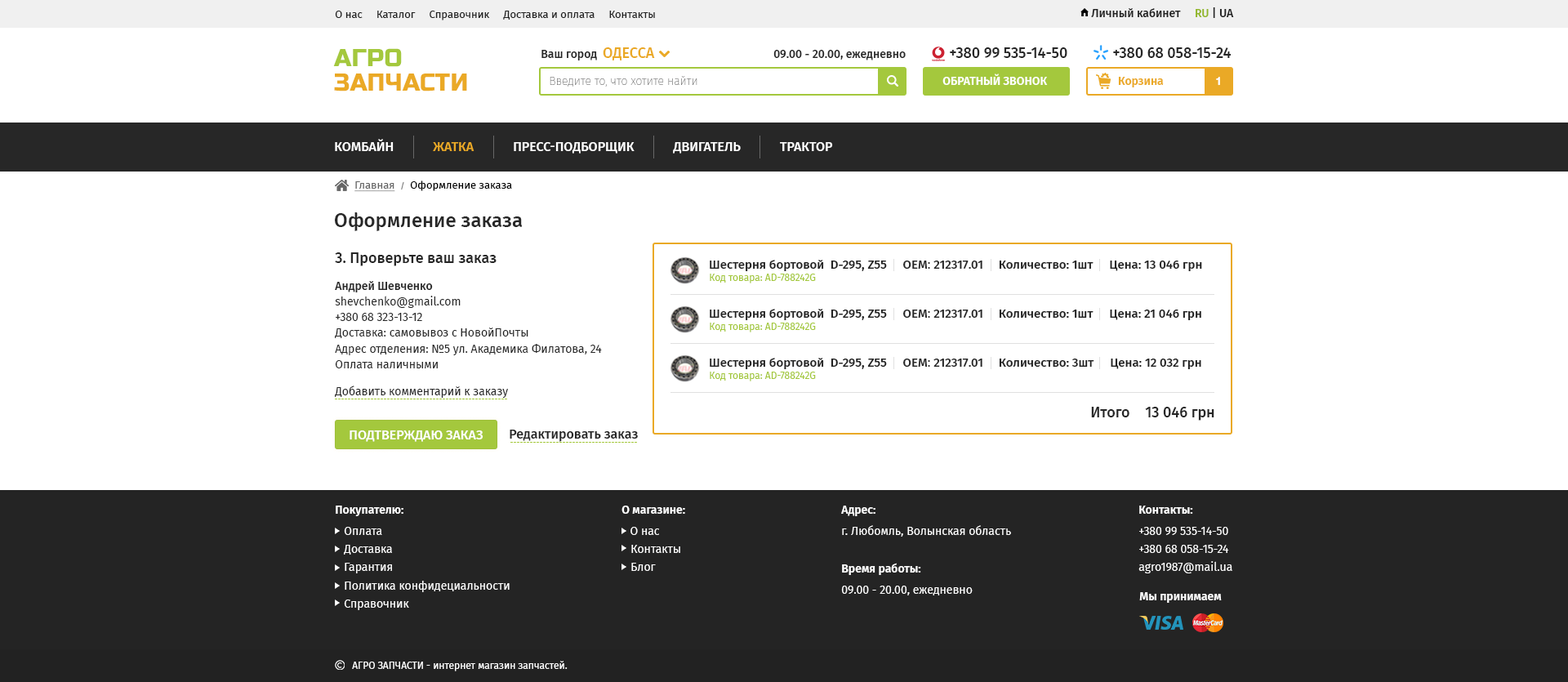
<style>
.page{position:relative;width:1568px;height:682px;background:#ffffff}
.page>*{position:absolute;margin:0}
.t1{font:10.6px "FiraSans-Regular";color:#212121}
.t2{font:11.4px "FiraSans-Medium";color:#212121}
.t3{font:11.4px "FiraSans-Medium";color:#91b627}
.t4{font:24.5px/24.5px "RussoOne-Regular";color:#eaa926;text-transform:uppercase}
.t5{font:24.5px/24.5px "RussoOne-Regular";color:#a4c83d;text-transform:uppercase}
.t6{font:11.4px "FiraSans-Medium";color:#272727}
.t7{font:14.7px "FiraSans-Medium";color:#eaa926}
.t8{font:14.7px "FiraSans-Medium";color:#272727}
.t9{font:11.4px "FiraSans-Thin";color:#777777}
.t10{font:11.4px "FiraSans-SemiBold";color:#ffffff;text-transform:uppercase}
.t11{font:11.4px "FiraSans-SemiBold";color:#eaa926}
.t12{font:11.4px "HelveticaNeueCyr-Bold";color:#ffffff}
.t13{font:13.1px "FiraSans-Medium";color:#ffffff;text-transform:uppercase}
.t14{font:13.1px "FiraSans-Medium";color:#eaa926;text-transform:uppercase}
.t15{font:10.6px "FiraSans-Regular";color:#000000}
.t16{font:10.6px "FiraSans-Regular";color:#676767;text-decoration:underline}
.t17{font:8.2px "FiraSans-Regular";color:#676767}
.t18{font:19.6px "FiraSans-Medium";color:#272727}
.t19{font:12.2px "FiraSans-Medium";color:#212121}
.t20{font:12.2px "FiraSans-Medium";color:#272727}
.t21{font:12.2px "FiraSans-Regular";color:#272727}
.t22{font:11.4px/15.5px "FiraSans-Regular";color:#272727}
.t23{font:11.4px/15.5px "FiraSans-Medium";color:#272727}
.t24{font:9.8px "FiraSans-Regular";color:#a4c83d}
.t25{font:11.4px "FiraSans-Regular";color:#272727}
.t26{font:13.1px "FiraSans-Medium";color:#272727}
.t27{font:11.4px/18px "FiraSans-Regular";color:#ffffff}
.t28{font:11.4px/21.2px "FiraSans-SemiBold";color:#ffffff}
.t29{font:11.4px/21.2px "FiraSans-Regular";color:#ffffff}
.t30{font:11.4px "FiraSans-SemiBold";color:#ffffff}
.t31{font:9.8px "FiraSans-Regular";color:#ffffff}
</style>
<div class="page">
<p class="t1" style="left:335px;top:11px;width:320px;height:9px">О нас     Каталог     Справочник     Доставка и оплата     Контакты</p>
<p class="t2" style="left:1091px;top:7px;width:143px;height:11px">Личный кабинет     <span class="t3">RU</span> | UA</p>
<p class="t4" style="left:333px;top:48px;width:134px;height:43px"><span class="t5">АГРО<br></span>ЗАПЧАСТИ</p>
<p class="t6" style="left:541px;top:47px;width:114px;height:13px">Ваш город  <span class="t7">ОДЕССА</span></p>
<p class="t6" style="left:773px;top:50px;width:133px;height:10px">09.00 - 20.00, ежедневно</p>
<p class="t8" style="left:950px;top:47px;width:117px;height:11px">+380 99 535-14-50</p>
<p class="t8" style="left:1113px;top:47px;width:118px;height:11px">+380 68 058-15-24</p>
<p class="t9" style="left:550px;top:76px;width:147px;height:11px">Введите то, что хотите найти</p>
<p class="t10" style="left:942px;top:74px;width:106px;height:11px">Обратный звонок</p>
<p class="t11" style="left:1118px;top:77px;width:46px;height:10px">Корзина</p>
<p class="t12" style="left:1216px;top:77px;width:4px;height:9px">1</p>
<p class="t13" style="left:335px;top:139px;width:498px;height:15px">КОМБАЙН            <span class="t14">ЖАТКА            </span>ПРЕСС-ПОДБОРЩИК            ДВИГАТЕЛЬ            трактор</p>
<p class="t15" style="left:354px;top:180px;width:158px;height:12px"><span class="t16">Главная  </span><span class="t17">/</span>  Оформление заказа</p>
<p class="t18" style="left:335px;top:212px;width:188px;height:19px">Оформление заказа</p>
<p class="t8" style="left:335px;top:252px;width:162px;height:14px">3. Проверьте ваш заказ</p>
<p class="t19" style="left:710px;top:260px;width:492px;height:11px">Шестерня бортовой  D-295, Z55     <span class="t20">ОЕМ</span><span class="t21">: </span><span class="t20">212317.01     </span>Количество: 1шт     Цена: 13 046 грн</p>
<p class="t22" style="left:335px;top:281px;width:267px;height:87px"><span class="t23">Андрей Шевченко<br></span>shevchenko@gmail.com<br>+380 68 323-13-12<br>Доставка: самовывоз с НовойПочты<br>Адрес отделения: №5 ул. Академика Филатова, 24<br>Оплата наличными</p>
<p class="t24" style="left:710px;top:274px;width:106px;height:9px">Код товара: AD-788242G</p>
<p class="t19" style="left:710px;top:309px;width:491px;height:11px">Шестерня бортовой  D-295, Z55     <span class="t20">ОЕМ</span><span class="t21">: </span><span class="t20">212317.01     </span>Количество: 1шт     Цена: 21 046 грн</p>
<p class="t24" style="left:710px;top:323px;width:106px;height:9px">Код товара: AD-788242G</p>
<p class="t19" style="left:710px;top:358px;width:491px;height:11px">Шестерня бортовой  D-295, Z55     <span class="t20">ОЕМ</span><span class="t21">: </span><span class="t20">212317.01     </span>Количество: 3шт     Цена: 12 032 грн</p>
<p class="t24" style="left:710px;top:372px;width:106px;height:9px">Код товара: AD-788242G</p>
<p class="t25" style="left:335px;top:385px;width:173px;height:13px">Добавить комментарий к заказу</p>
<p class="t8" style="left:1091px;top:407px;width:38px;height:10px">Итого</p>
<p class="t8" style="left:1145px;top:407px;width:69px;height:14px">13 046 грн</p>
<p class="t13" style="left:350px;top:430px;width:133px;height:12px">подтверждаю заказ</p>
<p class="t26" style="left:510px;top:430px;width:128px;height:12px">Редактировать заказ</p>
<p class="t27" style="left:336px;top:506px;width:174px;height:104px"><span class="t28">Покупателю:<br></span><span class="t29">   Оплата<br></span>   Доставка<br>   Гарантия<br>   Политика конфидециальности<br>   Справочник</p>
<p class="t27" style="left:621px;top:506px;width:64px;height:65px"><span class="t28">О магазине:<br>   </span><span class="t29">О нас<br></span>   Контакты<br>   Блог</p>
<p class="t29" style="left:841px;top:506px;width:170px;height:31px"><span class="t28">Адрес:<br></span>г. Любомль, Волынская область</p>
<p class="t27" style="left:1138px;top:506px;width:94px;height:67px"><span class="t28">Контакты:<br></span><span class="t29">+380 99 535-14-50<br></span>+380 68 058-15-24<br>agro1987@mail.ua</p>
<p class="t29" style="left:841px;top:563px;width:132px;height:32px"><span class="t28">Время работы:<br></span>09.00 - 20.00, ежедневно</p>
<p class="t30" style="left:1139px;top:592px;width:83px;height:11px">Мы принимаем</p>
<p class="t31" style="left:352px;top:661px;width:216px;height:10px">АГРО ЗАПЧАСТИ - интернет магазин запчастей.</p>
</div>
